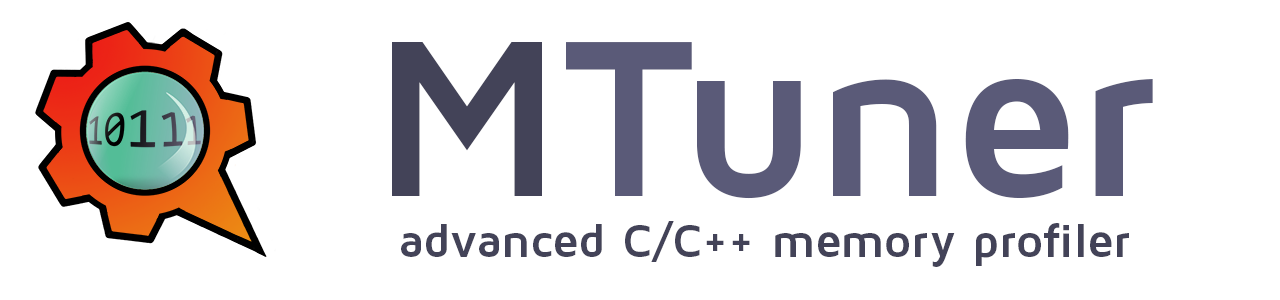
<style>
.page{position:relative;width:1280px;height:300px;background:#ffffff}
.page>*{position:absolute;margin:0}
.t1{font:230px "MavenProBold";color:#5a5a78}
.t2{font:230px "MavenProBold";color:#434358}
.t3{font:48px "MavenProBold";color:#434358}
</style>
<div class="page">
<p class="t1" style="left:392px;top:42px;width:761px;height:157px"><span class="t2">M</span>Tuner</p>
<p class="t3" style="left:401px;top:221px;width:728px;height:46px">advanced C/C++ memory profiler</p>
</div>
